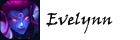
<style>
.page{position:relative;width:140px;height:40px;background:#ffffff}
.page>*{position:absolute;margin:0}
.t1{font:12px "VinerHandITC";color:#000000}
</style>
<div class="page">
<p class="t1" style="left:46px;top:12px;width:67px;height:22px">Evelynn</p>
</div>
